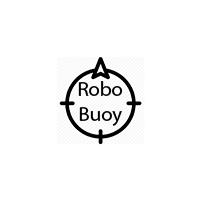
<style>
.page{position:relative;width:200px;height:200px;background:#ffffff}
.page>*{position:absolute;margin:0}
.t1{font:20.8px "MyriadPro-Regular";color:#000000}
</style>
<div class="page">
<p class="t1" style="left:78px;top:81px;width:45px;height:45px;text-align:center">Robo<br>Buoy</p>
</div>
